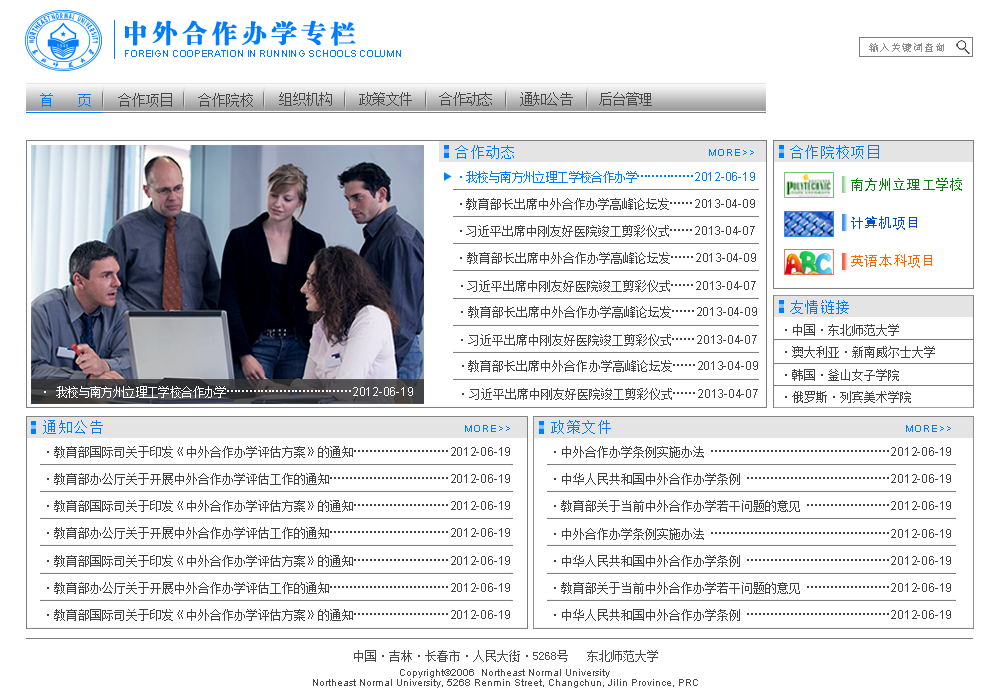
<style>
.page{position:relative;width:1000px;height:700px;background:#ffffff}
.page>*{position:absolute;margin:0}
.t1{font:26px "FZDBSJW--GB1-0";letter-spacing:0.115em;color:#007dff;text-transform:uppercase;font-weight:bold}
.t2{font:10px "ArialMT";color:#007dff}
.t3{font:10px "SimSun";letter-spacing:0.1em;color:#8c8c8c;text-transform:uppercase}
.t4{font:14px "SimSun";letter-spacing:-0.05em;color:#007dff;text-transform:uppercase}
.t5{font:14px "SimSun";color:#494949;text-transform:uppercase}
.t6{font:14px "SimSun";letter-spacing:-0.05em;color:#494949;text-transform:uppercase}
.t7{font:14px "SimSun";letter-spacing:0.1em;color:#007dff;text-transform:uppercase}
.t8{font:10px "ArialMT";letter-spacing:0.1em;color:#007dff;text-transform:uppercase}
.t9{font:12px "SimSun";letter-spacing:-0.05em;color:#007dff;text-transform:uppercase}
.t10{font:12px "ArialMT";color:#007dff;text-transform:uppercase}
.t11{font:14px/38px "AdobeHeitiStd-Regular";color:#008100;text-transform:uppercase}
.t12{font:14px/38px "AdobeHeitiStd-Regular";color:#004dd4;text-transform:uppercase}
.t13{font:14px/38px "AdobeHeitiStd-Regular";color:#ff6600;text-transform:uppercase}
.t14{font:12px "SimSun";color:#414141}
.t15{font:12px "SimSun";letter-spacing:-0.05em;color:#414141;text-transform:uppercase}
.t16{font:12px "ArialMT";color:#414141;text-transform:uppercase}
.t17{font:12px "SimSun";color:#414141;text-transform:uppercase}
.t18{font:12px "SimSun";letter-spacing:-0.05em;color:#ffffff;text-transform:uppercase}
.t19{font:12px "ArialMT";color:#ffffff;text-transform:uppercase}
.t20{font:11.8px "SimSun";color:#414141;text-transform:uppercase}
.t21{font:11.8px "ArialMT";color:#414141;text-transform:uppercase}
.t22{font:11.9px "SimSun";color:#49494a}
.t23{font:10px/10px "ArialMT";color:#49494a}
</style>
<div class="page">
<p class="t1" style="left:125px;top:20px;width:231px;height:26px">中外合作办学专栏</p>
<p class="t2" style="left:125px;top:50px;width:276px;height:7px">FOREIGN COOPERATION IN RUNNING SCHOOLS COLUMN</p>
<p class="t3" style="left:869px;top:43px;width:75px;height:9px">输入关键词查询</p>
<p class="t4" style="left:40px;top:93px;width:51px;height:14px">首    页</p>
<p class="t5" style="left:118px;top:93px;width:54px;height:14px">合作项目</p>
<p class="t5" style="left:198px;top:93px;width:55px;height:14px">合作院校</p>
<p class="t6" style="left:279px;top:92px;width:53px;height:14px">组织机构</p>
<p class="t6" style="left:359px;top:92px;width:53px;height:14px">政策文件</p>
<p class="t6" style="left:439px;top:92px;width:53px;height:14px">合作动态</p>
<p class="t6" style="left:520px;top:92px;width:53px;height:14px">通知公告</p>
<p class="t6" style="left:599px;top:92px;width:53px;height:14px">后台管理</p>
<p class="t7" style="left:455px;top:145px;width:59px;height:14px">合作动态</p>
<p class="t8" style="left:709px;top:149px;width:45px;height:7px">more&gt;&gt;</p>
<p class="t7" style="left:790px;top:145px;width:89px;height:14px">合作院校项目</p>
<p class="t9" style="left:460px;top:171px;width:295px;height:12px">·我校与南方州立理工学校合作办学……………<span class="t10">2012-06-19</span></p>
<p class="t11" style="left:851px;top:178px;width:111px;height:90px">南方州立理工学校<br><span class="t12">计算机项目<br></span><span class="t13">英语本科项目</span></p>
<p class="t14" style="left:460px;top:198px;width:295px;height:12px"><span class="t15">·</span>教育部长出席中外合作办学高峰论坛发……<span class="t16">2013-04-09</span></p>
<p class="t14" style="left:460px;top:225px;width:295px;height:12px"><span class="t15">·</span>习近平出席中刚友好医院竣工剪彩仪式……<span class="t16">2013-04-07</span></p>
<p class="t14" style="left:460px;top:252px;width:296px;height:12px"><span class="t15">·</span>教育部长出席中外合作办学高峰论坛发……<span class="t16">2013-04-09</span></p>
<p class="t14" style="left:461px;top:280px;width:295px;height:12px"><span class="t15">·</span>习近平出席中刚友好医院竣工剪彩仪式……<span class="t16">2013-04-07</span></p>
<p class="t7" style="left:790px;top:300px;width:59px;height:14px">友情链接</p>
<p class="t14" style="left:461px;top:306px;width:296px;height:12px"><span class="t15">·</span>教育部长出席中外合作办学高峰论坛发……<span class="t16">2013-04-09</span></p>
<p class="t17" style="left:785px;top:324px;width:114px;height:12px">·中国·东北师范大学</p>
<p class="t14" style="left:461px;top:334px;width:296px;height:12px"><span class="t15">·</span>习近平出席中刚友好医院竣工剪彩仪式……<span class="t16">2013-04-07</span></p>
<p class="t17" style="left:785px;top:346px;width:150px;height:12px">·澳大利亚·新南威尔士大学</p>
<p class="t14" style="left:462px;top:360px;width:296px;height:12px"><span class="t15">·</span>教育部长出席中外合作办学高峰论坛发……<span class="t16">2013-04-09</span></p>
<p class="t17" style="left:785px;top:369px;width:114px;height:12px">·韩国·釜山女子学院</p>
<p class="t18" style="left:44px;top:386px;width:369px;height:12px">· 我校与南方州立理工学校合作办学……………………………<span class="t19">2012-06-19</span></p>
<p class="t14" style="left:462px;top:388px;width:296px;height:12px"><span class="t15">·</span>习近平出席中刚友好医院竣工剪彩仪式……<span class="t16">2013-04-07</span></p>
<p class="t17" style="left:785px;top:391px;width:126px;height:12px">·俄罗斯·列宾美术学院</p>
<p class="t7" style="left:43px;top:420px;width:60px;height:14px">通知公告</p>
<p class="t8" style="left:465px;top:425px;width:45px;height:7px">more&gt;&gt;</p>
<p class="t7" style="left:551px;top:420px;width:60px;height:14px">政策文件</p>
<p class="t8" style="left:906px;top:425px;width:45px;height:7px">more&gt;&gt;</p>
<p class="t17" style="left:47px;top:446px;width:463px;height:12px">·教育部国际司关于印发《中外合作办学评估方案》的通知……………………<span class="t16">2012-06-19</span></p>
<p class="t17" style="left:554px;top:446px;width:397px;height:12px">·中外合作办学条例实施办法 ………………………………………<span class="t16">2012-06-19</span></p>
<p class="t17" style="left:47px;top:473px;width:463px;height:12px">·教育部办公厅关于开展中外合作办学评估工作的通知…………………………<span class="t16">2012-06-19</span></p>
<p class="t17" style="left:554px;top:473px;width:397px;height:12px">·中华人民共和国中外合作办学条例 ………………………………<span class="t16">2012-06-19</span></p>
<p class="t17" style="left:47px;top:500px;width:463px;height:12px">·教育部国际司关于印发《中外合作办学评估方案》的通知……………………<span class="t16">2012-06-19</span></p>
<p class="t17" style="left:554px;top:500px;width:397px;height:12px">·教育部关于当前中外合作办学若干问题的意见 …………………<span class="t16">2012-06-19</span></p>
<p class="t20" style="left:47px;top:527px;width:463px;height:12px">·教育部办公厅关于开展中外合作办学评估工作的通知…………………………<span class="t21">2012-06-19</span></p>
<p class="t17" style="left:554px;top:528px;width:397px;height:12px">·中外合作办学条例实施办法 ………………………………………<span class="t16">2012-06-19</span></p>
<p class="t20" style="left:47px;top:555px;width:463px;height:12px">·教育部国际司关于印发《中外合作办学评估方案》的通知……………………<span class="t21">2012-06-19</span></p>
<p class="t17" style="left:554px;top:555px;width:397px;height:12px">·中华人民共和国中外合作办学条例 ………………………………<span class="t16">2012-06-19</span></p>
<p class="t20" style="left:47px;top:582px;width:463px;height:12px">·教育部办公厅关于开展中外合作办学评估工作的通知…………………………<span class="t21">2012-06-19</span></p>
<p class="t17" style="left:554px;top:582px;width:397px;height:12px">·教育部关于当前中外合作办学若干问题的意见 …………………<span class="t16">2012-06-19</span></p>
<p class="t20" style="left:47px;top:609px;width:463px;height:12px">·教育部国际司关于印发《中外合作办学评估方案》的通知……………………<span class="t21">2012-06-19</span></p>
<p class="t17" style="left:554px;top:609px;width:397px;height:12px">·中华人民共和国中外合作办学条例 ………………………………<span class="t16">2012-06-19</span></p>
<p class="t22" style="left:354px;top:650px;width:304px;height:12px">中国·吉林·长春市·人民大街·5268号   东北师范大学</p>
<p class="t23" style="left:313px;top:669px;width:385px;height:19px;text-align:center">Copyright©2006  Northeast Normal University <br>Northeast Normal University, 5268 Renmin Street, Changchun, Jilin Province, PRC</p>
</div>
